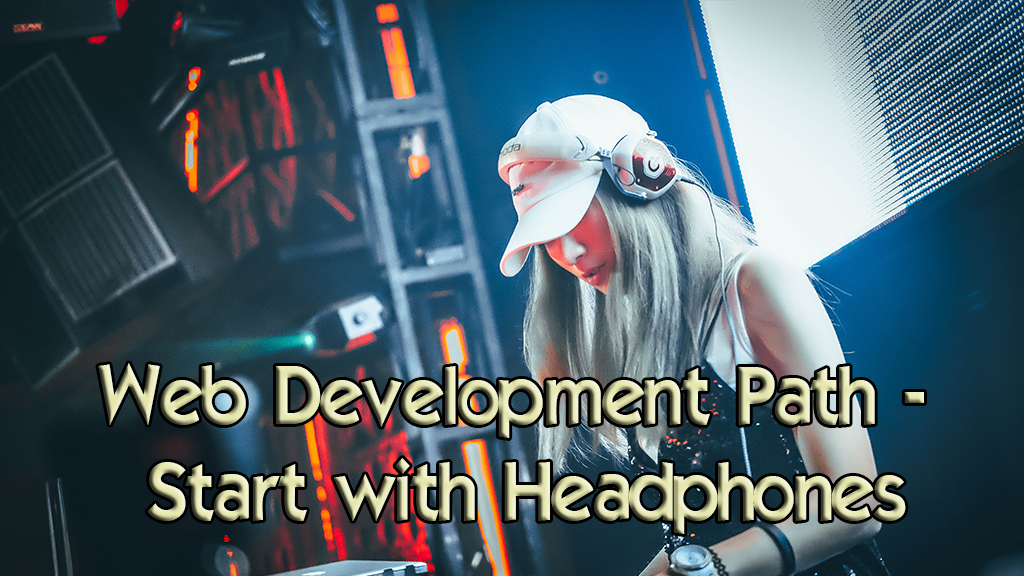
<style>
.page{position:relative;width:1024px;height:576px}
.page>*{position:absolute;margin:0}
.t1{font:80px "ELEGANCE"}
</style>
<div class="page">
<p class="t1" style="left:98px;top:363px;width:826px;height:171px;text-align:center">Web Development Path - <br>Start with Headphones</p>
</div>
